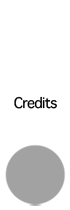
<style>
.page{position:relative;width:70px;height:210px;background:#ffffff}
.page>*{position:absolute;margin:0}
.t1{font:14px "Thonburi";letter-spacing:-0.05em;color:#000000}
</style>
<div class="page">
<p class="t1" style="left:14px;top:96px;width:43px;height:13px">Credits</p>
</div>
